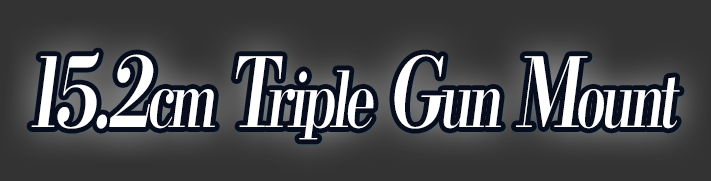
<style>
.page{position:relative;width:711px;height:181px;background:#333333}
.page>*{position:absolute;margin:0}
.t1{font:76.8px "KochoStd-Heavy";letter-spacing:-0.08em;color:#ffffff;font-style:italic;scale:0.72 1}
.t2{font:96px "KochoStd-Heavy";letter-spacing:-0.08em;color:#ffffff;font-style:italic;scale:0.72 1}
</style>
<div class="page">
<p class="t1" style="left:31px;top:52px;width:649px;height:88px"><span class="t2">15.2</span>cm<span class="t2"> T</span>riple<span class="t2"> G</span>un<span class="t2"> M</span>ount</p>
</div>
